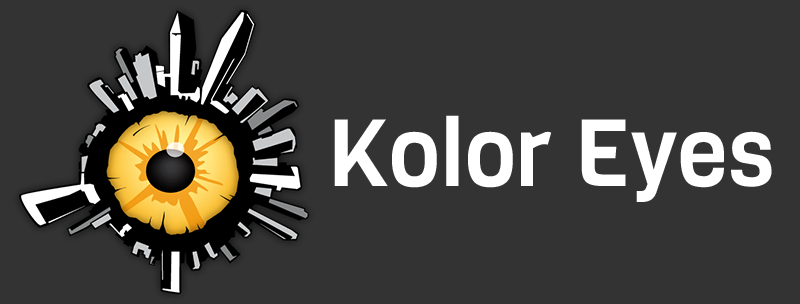
<style>
.page{position:relative;width:800px;height:304px;background:#333333}
.page>*{position:absolute;margin:0}
.t1{font:93.6px "Viga-Regular";color:#ffffff}
</style>
<div class="page">
<p class="t1" style="left:334px;top:115px;width:438px;height:87px">Kolor Eyes</p>
</div>
